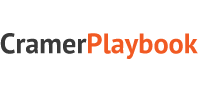
<style>
.page{position:relative;width:198px;height:86px;background:#ffffff}
.page>*{position:absolute;margin:0}
.t1{font:28.2px "PTSans-Bold";color:#f15a23}
.t2{font:28.2px "PTSans-Bold";color:#3a3a3a}
</style>
<div class="page">
<p class="t1" style="left:0px;top:33px;width:198px;height:26px"><span class="t2">Cramer</span>Playbook</p>
</div>
